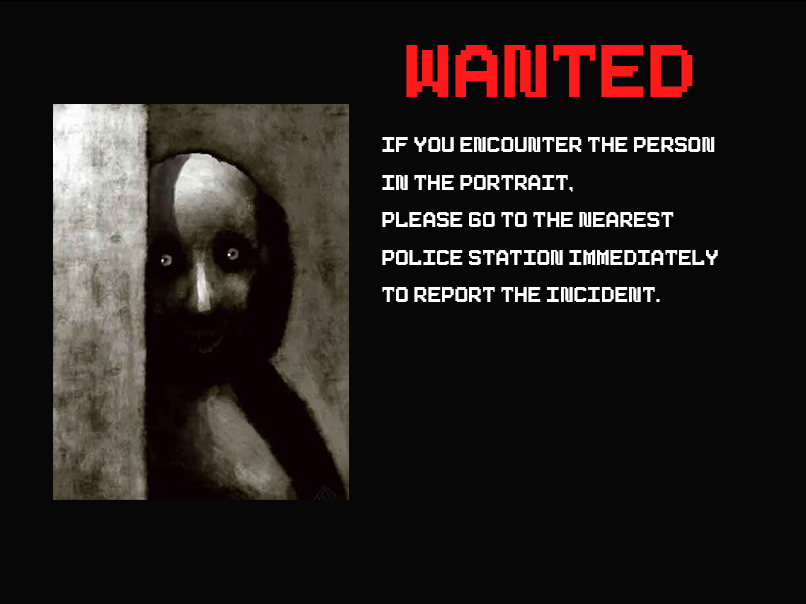
<style>
.page{position:relative;width:806px;height:604px;background:#070707}
.page>*{position:absolute;margin:0}
.t1{font:104.2px "Pixeboy";color:#ff1919}
.t2{font:29.2px/37.5px "Pixeboy";color:#ffffff}
</style>
<div class="page">
<p class="t1" style="left:406px;top:45px;width:287px;height:52px">Wanted</p>
<p class="t2" style="left:382px;top:137px;width:336px;height:165px">If you encounter the person <br>in the portrait,<br>please go to the nearest <br>police station immediately <br>to report the incident.</p>
</div>
